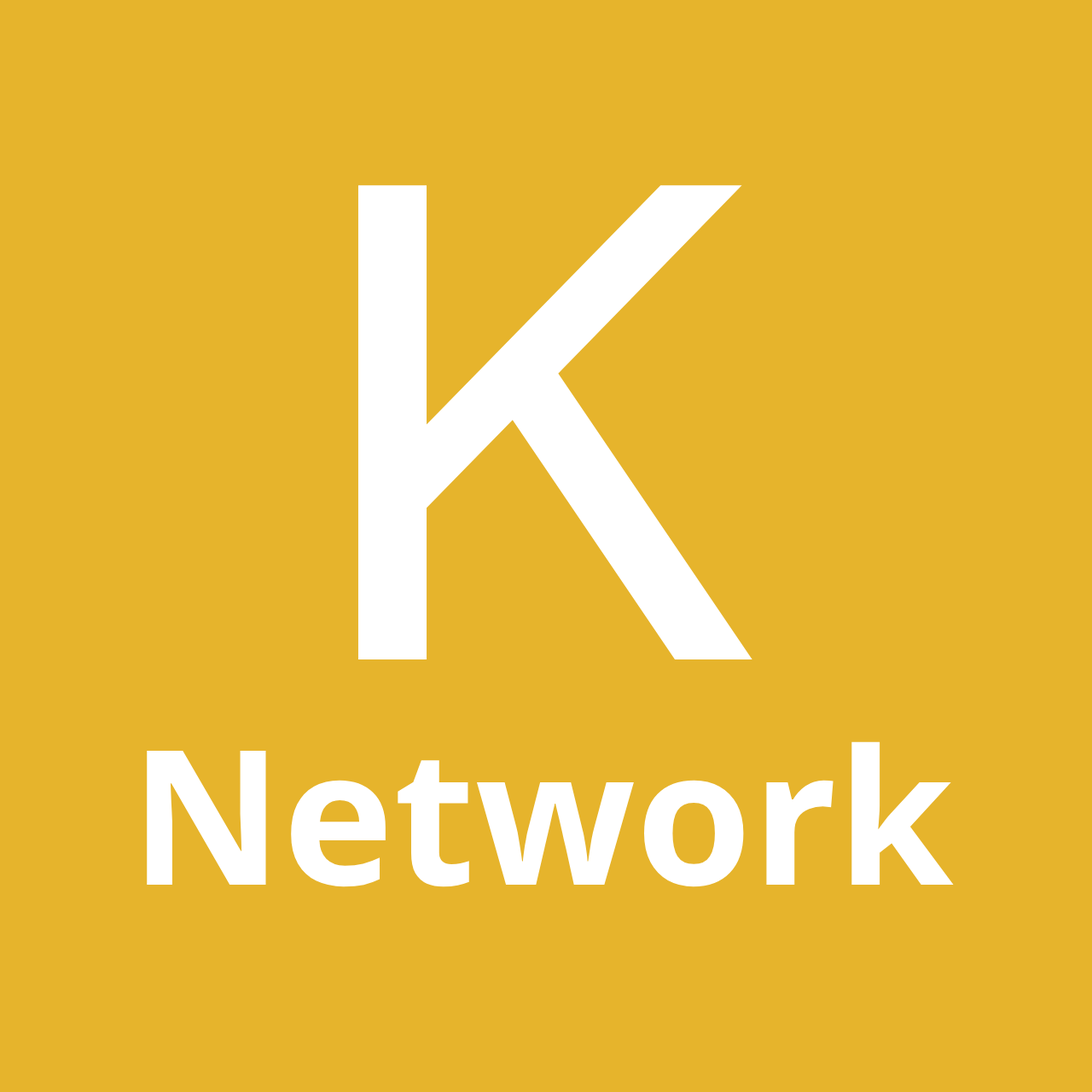
<style>
.page{position:relative;width:1092px;height:1092px;background:#e6b42c}
.page>*{position:absolute;margin:0}
.t1{font:187.7px "NotoSans-Bold";color:#ffffff}
.t2{font:682.5px "CMUBright-SemiBold";color:#ffffff}
</style>
<div class="page">
<p class="t1" style="left:147px;top:185px;width:807px;height:702px;text-align:center"><span class="t2">K<br></span>Network</p>
</div>
